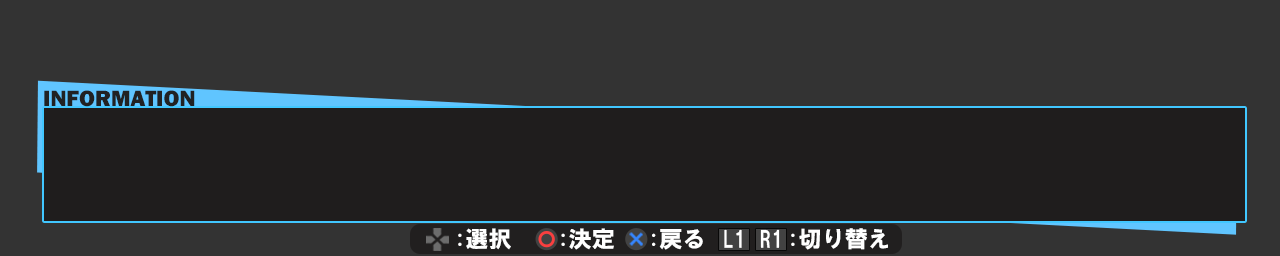
<style>
.page{position:relative;width:1280px;height:256px;background:#333333}
.page>*{position:absolute;margin:0}
.t1{font:23px "FranklinGothic-Heavy";color:#212223}
.t2{font:23px "HGSoeiKakugothicUB";color:#ffffff}
</style>
<div class="page">
<p class="t1" style="left:44px;top:90px;width:151px;height:17px">INFORMATION</p>
<p class="t2" style="left:458px;top:228px;width:53px;height:22px">:選択</p>
<p class="t2" style="left:561px;top:228px;width:53px;height:22px">:決定</p>
<p class="t2" style="left:652px;top:229px;width:51px;height:21px">:戻る</p>
<p class="t2" style="left:791px;top:228px;width:97px;height:22px">:切り替え</p>
</div>
